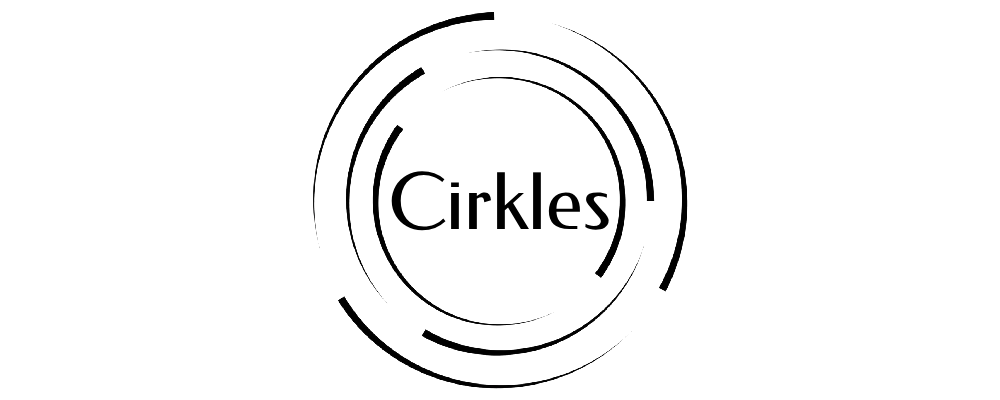
<style>
.page{position:relative;width:1000px;height:400px;background:#ffffff}
.page>*{position:absolute;margin:0}
.t1{font:78px "Federo-Regular";color:#000000}
</style>
<div class="page">
<p class="t1" style="left:391px;top:171px;width:218px;height:60px">Cirkles</p>
</div>
